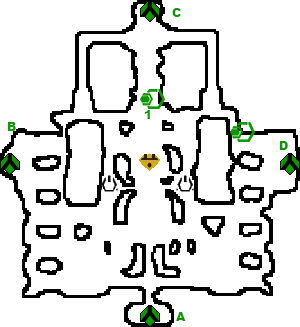
<style>
.page{position:relative;width:300px;height:327px;background:#ffffff}
.page>*{position:absolute;margin:0}
.t1{font:12px "Arial-Black";color:#0c9801}
</style>
<div class="page">
<p class="t1" style="left:172px;top:8px;width:9px;height:9px">C</p>
<p class="t1" style="left:145px;top:110px;width:5px;height:9px">1</p>
<p class="t1" style="left:7px;top:122px;width:9px;height:9px">B</p>
<p class="t1" style="left:279px;top:141px;width:9px;height:9px">D</p>
<p class="t1" style="left:176px;top:312px;width:10px;height:9px">A</p>
</div>
